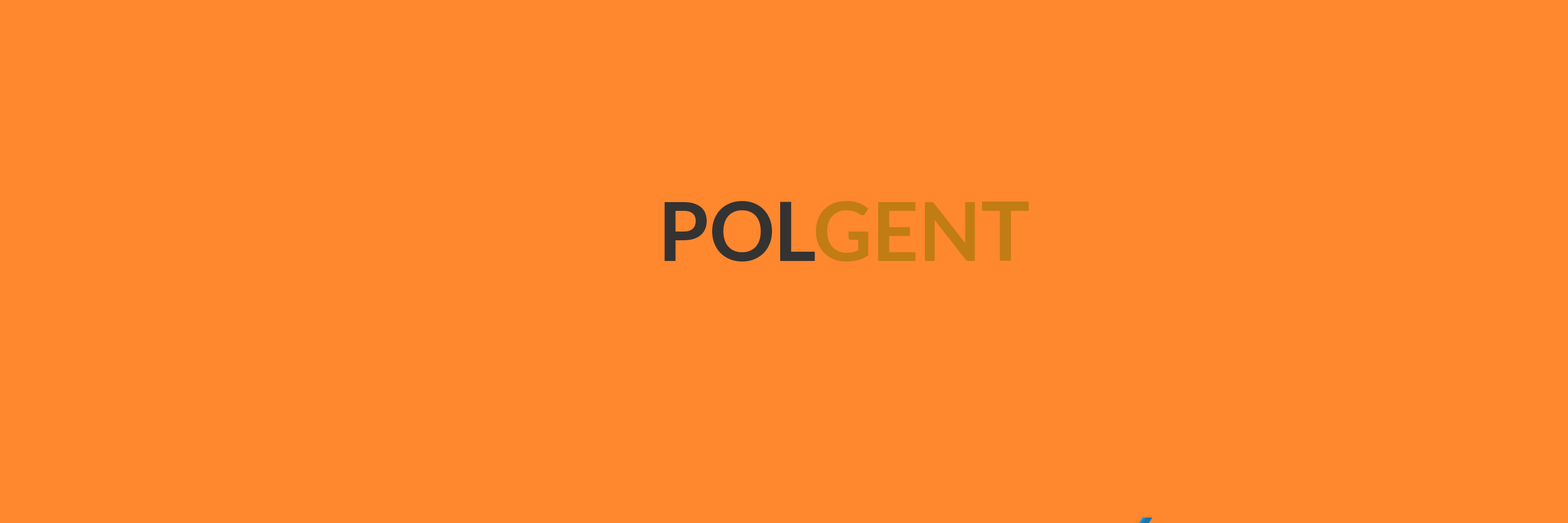
<style>
.page{position:relative;width:1568px;height:523px;background:#ff872e}
.page>*{position:absolute;margin:0}
.t1{font:81.7px "Lato-Bold";color:#c17c14}
.t2{font:81.7px "Lato-Bold";color:#343332}
</style>
<div class="page">
<p class="t1" style="left:664px;top:201px;width:365px;height:60px"><span class="t2">POL</span>GENT</p>
</div>
